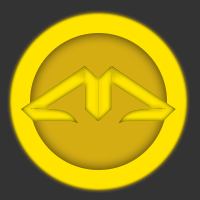
<style>
.page{position:relative;width:200px;height:200px;background:#333333}
.page>*{position:absolute;margin:0}
.t1{font:79.2px "bladeline";color:#f4da00}
</style>
<div class="page">
<p class="t1" style="left:21px;top:66px;width:155px;height:57px">M</p>
</div>
